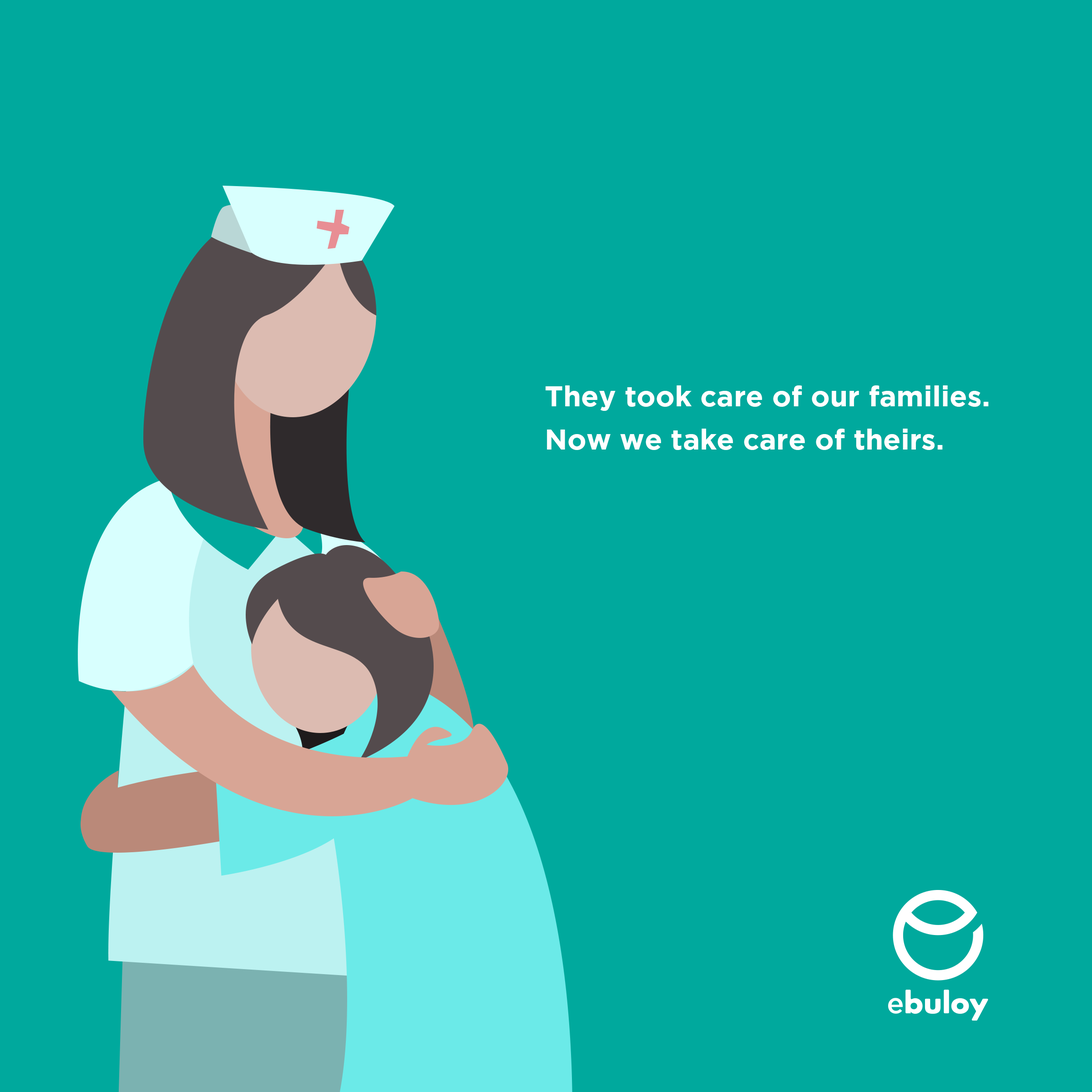
<style>
.page{position:relative;width:1092px;height:1092px;background:#00a99d}
.page>*{position:absolute;margin:0}
.t1{font:28.7px/43.1px "Gotham-Bold";color:#ffffff}
</style>
<div class="page">
<p class="t1" style="left:546px;top:385px;width:443px;height:65px">They took care of our families.<br>Now we take care of theirs.</p>
</div>
